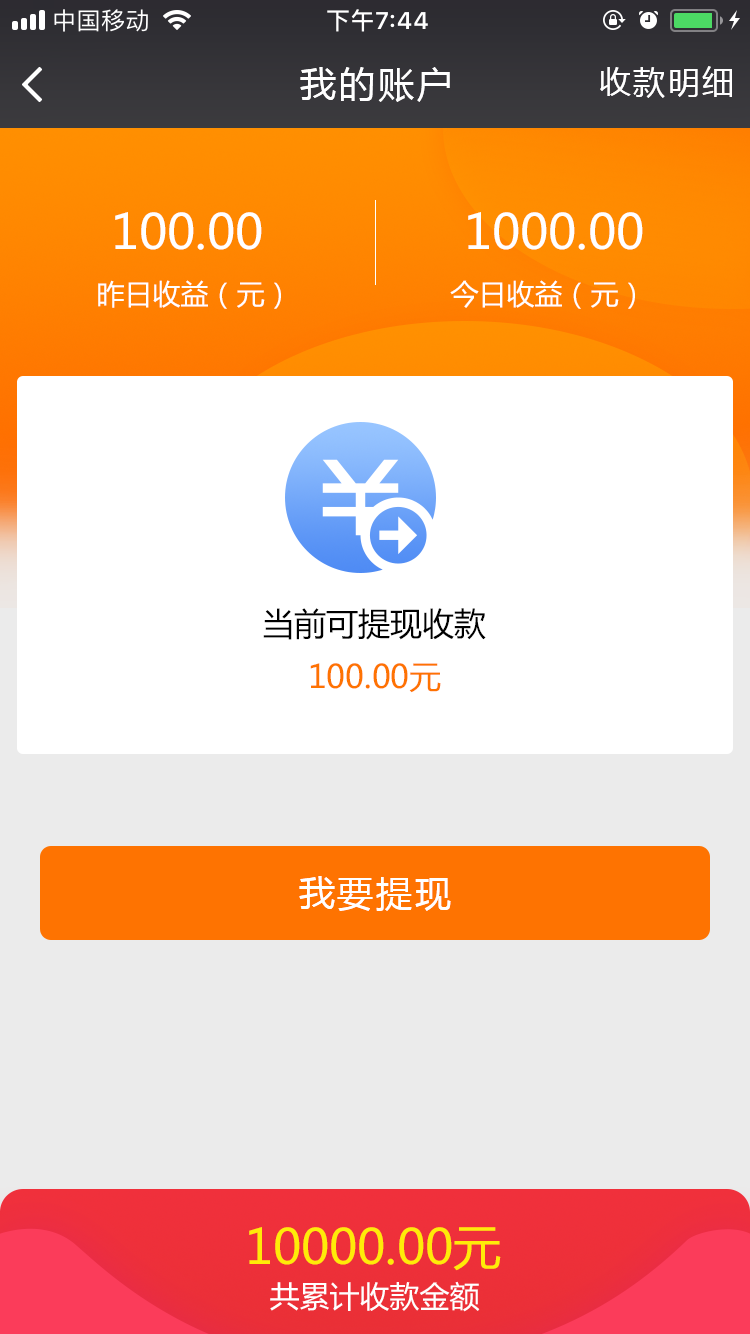
<style>
.page{position:relative;width:750px;height:1334px;background:#ebebeb}
.page>*{position:absolute;margin:0}
.t1{font:36px "MicrosoftYaHei";letter-spacing:0.08em;color:#ffffff}
.t2{font:32px "MicrosoftYaHei";letter-spacing:0.08em;color:#ffffff}
.t3{font:48px "MicrosoftYaHei";color:#ffffff}
.t4{font:28px "MicrosoftYaHei";color:#ffffff}
.t5{font:32px "MicrosoftYaHei";color:#000000}
.t6{font:32px "MicrosoftYaHei";color:#fe7301}
.t7{font:48px "MicrosoftYaHei";color:#ffeb08}
.t8{font:30px "MicrosoftYaHei";color:#ffffff}
</style>
<div class="page">
<p class="t1" style="left:300px;top:67px;width:150px;height:35px">我的账户</p>
<p class="t2" style="left:600px;top:66px;width:132px;height:32px">收款明细</p>
<p class="t3" style="left:115px;top:212px;width:147px;height:38px">100.00</p>
<p class="t3" style="left:468px;top:212px;width:175px;height:38px">1000.00</p>
<p class="t4" style="left:98px;top:280px;width:183px;height:29px">昨日收益（元）</p>
<p class="t4" style="left:450px;top:280px;width:185px;height:29px">今日收益（元）</p>
<p class="t5" style="left:263px;top:608px;width:223px;height:32px">当前可提现收款</p>
<p class="t6" style="left:310px;top:663px;width:131px;height:30px">100.00元</p>
<p class="t1" style="left:299px;top:876px;width:152px;height:35px">我要提现</p>
<p class="t7" style="left:249px;top:1227px;width:252px;height:44px">10000.00元</p>
<p class="t8" style="left:270px;top:1281px;width:210px;height:31px">共累计收款金额</p>
</div>
